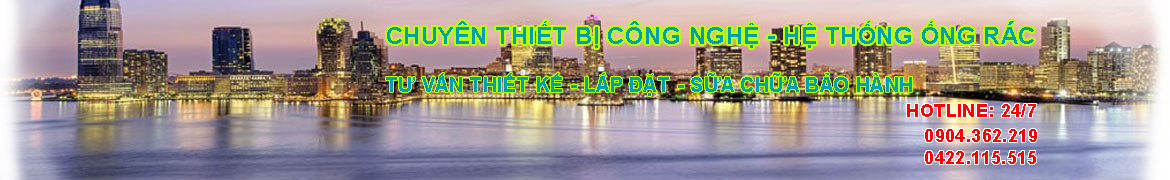
<style>
.page{position:relative;width:1170px;height:180px}
.page>*{position:absolute;margin:0}
.t1{font:24px "Arial-BoldMT";letter-spacing:0.02em;color:#00a1ad;text-transform:uppercase}
.t2{font:20px "Arial-BoldMT";letter-spacing:0.02em;color:#00a1ad;text-transform:uppercase}
.t3{font:18px "Arial-BoldMT";letter-spacing:0.02em;color:#fe0101;text-transform:uppercase}
.t4{font:18px "Arial-BoldMT";letter-spacing:0.02em;color:#ff0000;text-transform:uppercase}
</style>
<div class="page">
<p class="t1" style="left:387px;top:21px;width:647px;height:27px">Chuyên Thiết bị Công nghệ - Hệ thống Ống rác</p>
<p class="t2" style="left:386px;top:73px;width:526px;height:23px">Tư vấn Thiết kế - Lắp đặt - Sữa chữa bảo hành</p>
<p class="t3" style="left:907px;top:104px;width:129px;height:13px">Hotline: 24/7</p>
<p class="t4" style="left:925px;top:129px;width:112px;height:35px">0904.362.219<br>0422.115.515</p>
</div>
